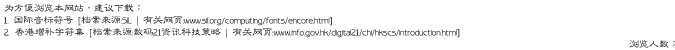
<style>
.page{position:relative;width:675px;height:50px;background:#ffffff}
.page>*{position:absolute;margin:0}
.t1{font:10px "IDLiMedSMP";color:#000000}
</style>
<div class="page">
<p class="t1" style="left:4px;top:4px;width:671px;height:44px">為方便瀏覽本網站，建議下載：<br>1. 國際音標符號 [檔案來源:SIL | 有關網頁:www.sil.org/computing/fonts/encore.html] <br>2. 香港增補字符集 [檔案來源:數碼21資訊科技策略 | 有關網頁:www.info.gov.hk/digital21/chi/hkscs/introduction.html]<br>                                                                                                                             瀏覽人數：</p>
</div>
